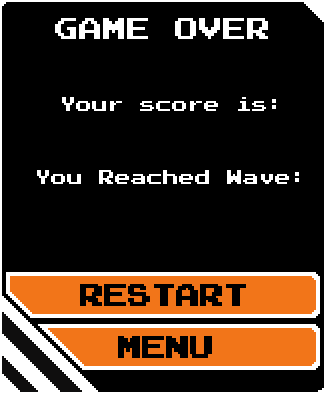
<style>
.page{position:relative;width:326px;height:394px;background:#000000}
.page>*{position:absolute;margin:0}
.t1{font:24px "PressStart2P";color:#ffffff}
.t2{font:16px "PressStart2P";color:#ffffff}
</style>
<div class="page">
<p class="t1" style="left:55px;top:18px;width:213px;height:21px">GAME OVER</p>
<p class="t2" style="left:62px;top:97px;width:214px;height:14px">Your score is:</p>
<p class="t2" style="left:37px;top:170px;width:262px;height:14px">You Reached Wave:</p>
</div>
